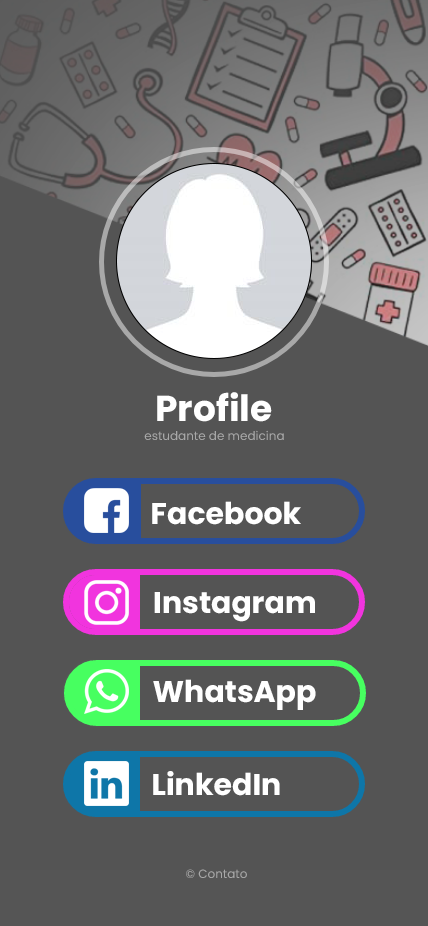
<style>
.page{position:relative;width:428px;height:926px;background:#545454}
.page>*{position:absolute;margin:0}
.t1{font:36px "Poppins-Bold";color:#ffffff}
.t2{font:12px "Poppins-Regular";color:#a8a8a8}
.t3{font:30px "Poppins-Bold";color:#ffffff}
</style>
<div class="page">
<p class="t1" style="left:157px;top:392px;width:115px;height:30px">Profile</p>
<p class="t2" style="left:144px;top:430px;width:140px;height:10px">estudante de medicina</p>
<p class="t3" style="left:152px;top:501px;width:149px;height:24px">Facebook</p>
<p class="t3" style="left:154px;top:592px;width:161px;height:30px">Instagram</p>
<p class="t3" style="left:153px;top:679px;width:163px;height:31px">WhatsApp</p>
<p class="t3" style="left:153px;top:771px;width:127px;height:25px">LinkedIn</p>
<p class="t2" style="left:186px;top:869px;width:61px;height:9px">© Contato</p>
</div>
